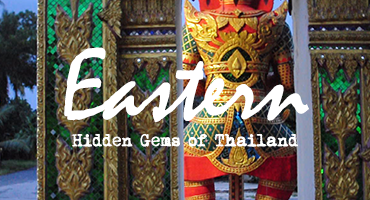
<style>
.page{position:relative;width:370px;height:200px}
.page>*{position:absolute;margin:0}
.t1{font:102.4px "Mistral";color:#ffffff}
.t2{font:15.4px "MomsTypewriter";color:#ffffff}
</style>
<div class="page">
<p class="t1" style="left:64px;top:47px;width:245px;height:76px">Eastern</p>
<p class="t2" style="left:71px;top:133px;width:227px;height:14px">Hidden Gems of Thailand</p>
</div>
